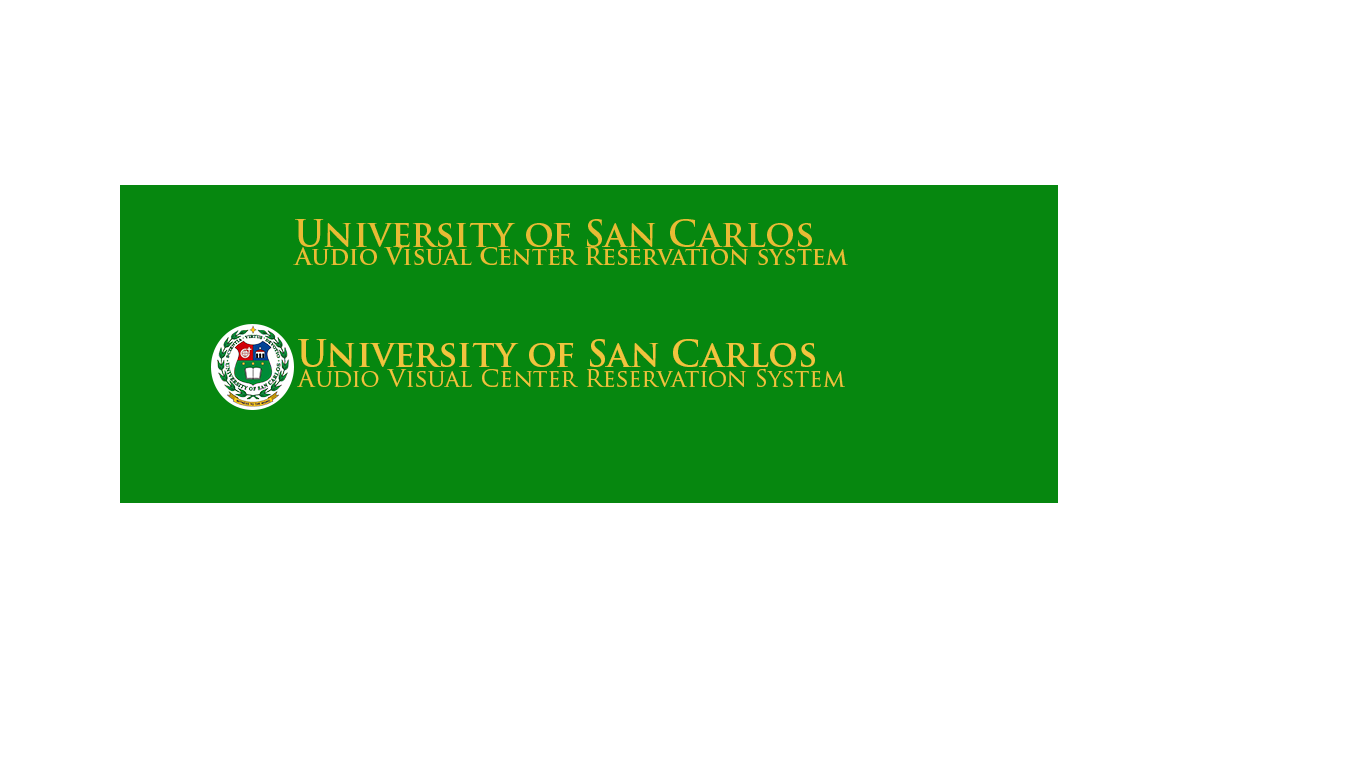
<style>
.page{position:relative;width:1366px;height:768px;background:#ffffff}
.page>*{position:absolute;margin:0}
.t1{font:36px "TrajanPro-Bold";color:#f1c43e}
.t2{font:24px "TrajanPro-Regular";color:#f1c43e}
</style>
<div class="page">
<p class="t1" style="left:298px;top:339px;width:517px;height:28px">University of San Carlos</p>
<p class="t2" style="left:297px;top:368px;width:548px;height:20px">Audio Visual Center Reservation System</p>
</div>
